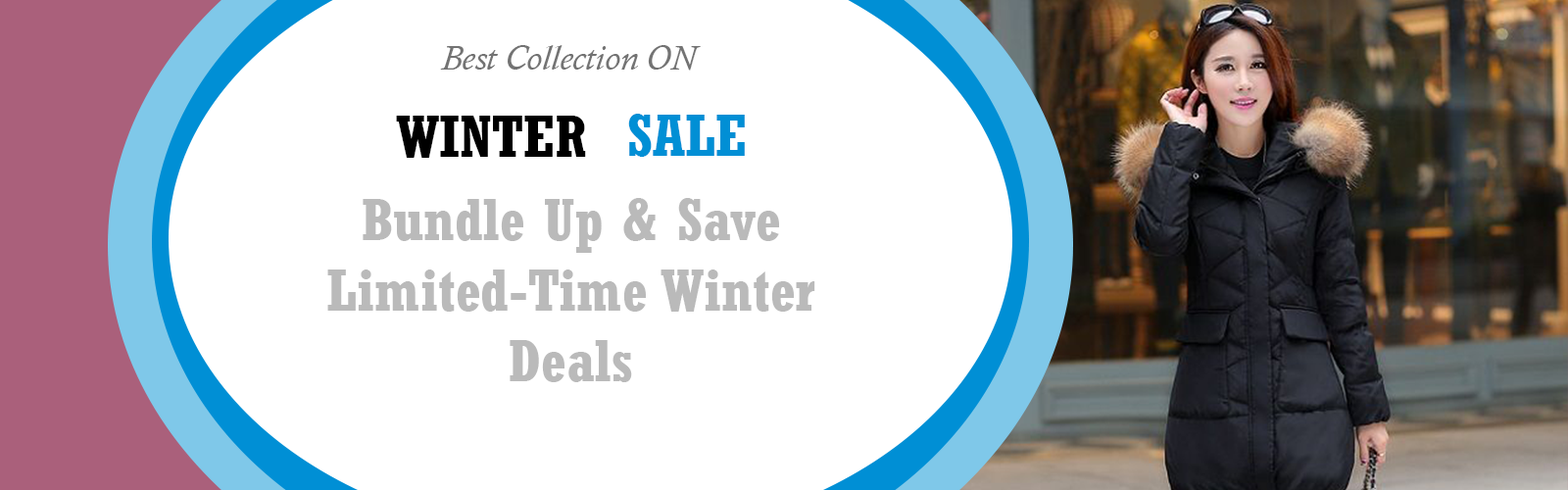
<style>
.page{position:relative;width:1568px;height:490px;background:#ffffff}
.page>*{position:absolute;margin:0}
.t1{font:35.3px "CalistoMT-Italic";color:#737373}
.t2{font:58.8px "Rockwell-CondensedBold";color:#018fd5}
.t3{font:58.8px "Rockwell-CondensedBold";color:#000000}
.t4{font:58.8px "Rockwell-CondensedBold";color:#bababa}
</style>
<div class="page">
<p class="t1" style="left:440px;top:45px;width:261px;height:26px">Best Collection ON</p>
<p class="t2" style="left:628px;top:114px;width:117px;height:43px">SALE</p>
<p class="t3" style="left:396px;top:116px;width:190px;height:42px">WINTER</p>
<p class="t4" style="left:327px;top:198px;width:488px;height:184px;text-align:center">Bundle Up &amp; Save Limited-Time Winter Deals</p>
</div>
